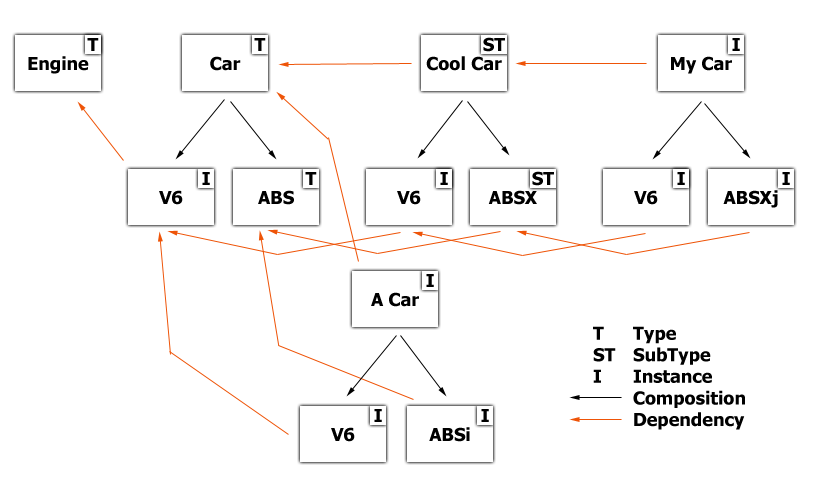
<style>
.page{position:relative;width:815px;height:485px;background:#ffffff}
.page>*{position:absolute;margin:0}
.t1{font:18px "Tahoma-Bold";color:#000000}
</style>
<div class="page">
<p class="t1" style="left:87px;top:38px;width:12px;height:13px">T</p>
<p class="t1" style="left:254px;top:38px;width:12px;height:13px">T</p>
<p class="t1" style="left:483px;top:37px;width:22px;height:15px">ST</p>
<p class="t1" style="left:732px;top:38px;width:8px;height:13px">I</p>
<p class="t1" style="left:28px;top:56px;width:61px;height:18px">Engine</p>
<p class="t1" style="left:210px;top:56px;width:31px;height:15px">Car</p>
<p class="t1" style="left:426px;top:56px;width:76px;height:15px">Cool Car</p>
<p class="t1" style="left:671px;top:56px;width:61px;height:18px">My Car</p>
<p class="t1" style="left:202px;top:172px;width:8px;height:13px">I</p>
<p class="t1" style="left:305px;top:172px;width:12px;height:13px">T</p>
<p class="t1" style="left:440px;top:172px;width:8px;height:13px">I</p>
<p class="t1" style="left:532px;top:171px;width:22px;height:15px">ST</p>
<p class="t1" style="left:677px;top:172px;width:8px;height:13px">I</p>
<p class="t1" style="left:782px;top:172px;width:8px;height:13px">I</p>
<p class="t1" style="left:159px;top:190px;width:24px;height:15px">V6</p>
<p class="t1" style="left:258px;top:190px;width:36px;height:15px">ABS</p>
<p class="t1" style="left:397px;top:190px;width:24px;height:15px">V6</p>
<p class="t1" style="left:488px;top:190px;width:49px;height:15px">ABSX</p>
<p class="t1" style="left:634px;top:190px;width:24px;height:15px">V6</p>
<p class="t1" style="left:723px;top:190px;width:55px;height:18px">ABSXj</p>
<p class="t1" style="left:426px;top:274px;width:8px;height:13px">I</p>
<p class="t1" style="left:371px;top:292px;width:48px;height:15px">A Car</p>
<p class="t1" style="left:593px;top:326px;width:23px;height:57px">T <br>ST <br>I</p>
<p class="t1" style="left:633px;top:326px;width:112px;height:104px">Type<br>SubType<br>Instance<br>Composition<br>Dependency</p>
<p class="t1" style="left:374px;top:409px;width:8px;height:13px">I</p>
<p class="t1" style="left:481px;top:409px;width:8px;height:13px">I</p>
<p class="t1" style="left:331px;top:427px;width:24px;height:15px">V6</p>
<p class="t1" style="left:429px;top:427px;width:41px;height:15px">ABSi</p>
</div>
